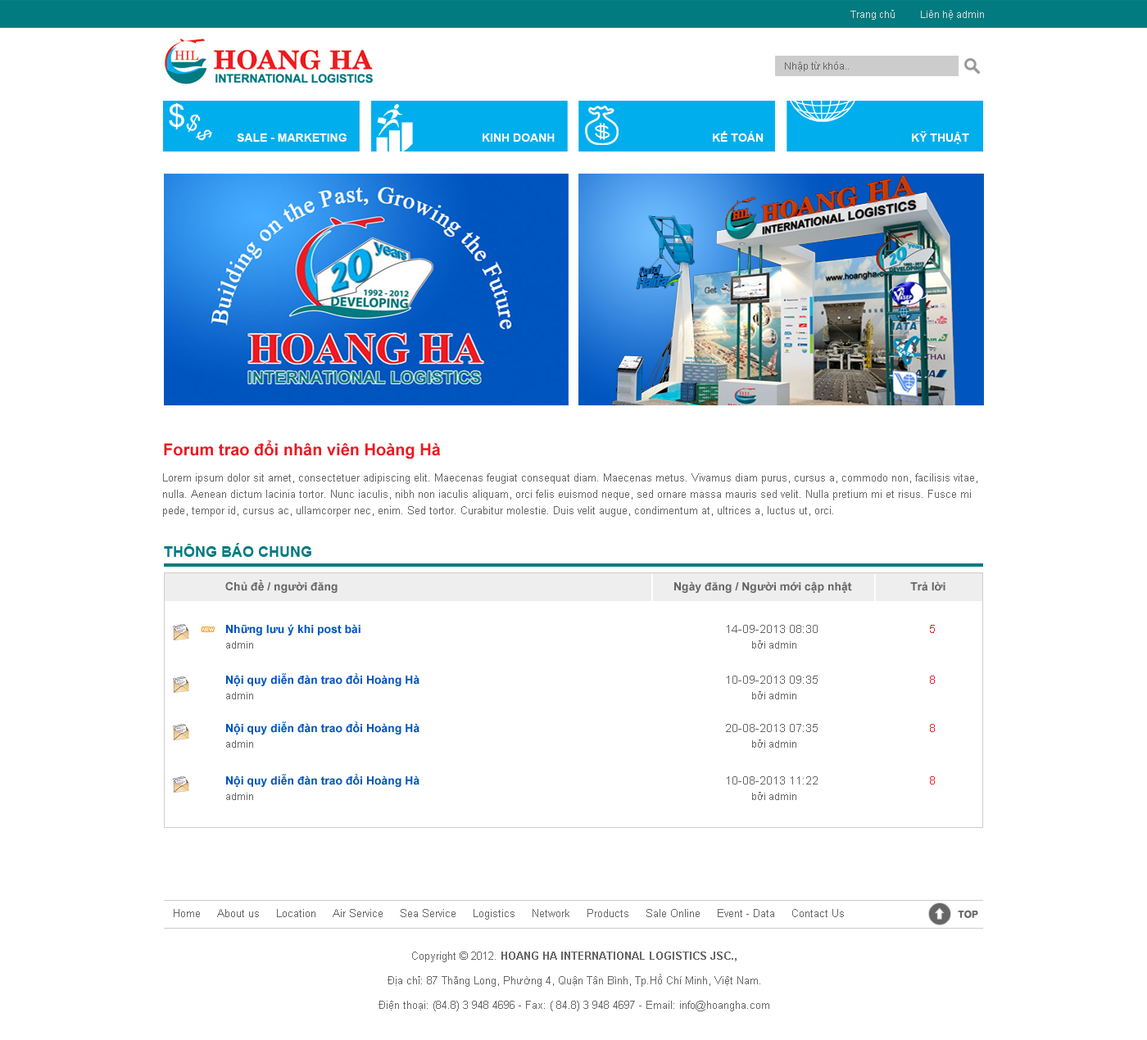
<style>
.page{position:relative;width:1147px;height:1040px;background:#ffffff}
.page>*{position:absolute;margin:0}
.t1{font:9.8px "ArialMT";color:#dddddd}
.t2{font:9.8px "ArialMT";color:#666666}
.t3{font:11.5px "Arial-BoldMT";color:#ffffff}
.t4{font:16.4px "Arial-BoldMT";color:#ed1721}
.t5{font:10.6px/16.4px "ArialMT";color:#666666}
.t6{font:14.7px "Arial-BoldMT";color:#017b80}
.t7{font:11.5px "Arial-BoldMT";color:#666666}
.t8{font:11.5px "Arial-BoldMT";color:#0055be}
.t9{font:11.5px "ArialMT";color:#666666}
.t10{font:11.5px "ArialMT";color:#f01e27}
.t11{font:10.6px "ArialMT";color:#666666}
.t12{font:10.6px/16.4px "Arial-BoldMT";color:#666666}
</style>
<div class="page">
<p class="t1" style="left:850px;top:10px;width:134px;height:10px">Trang chủ          Liên hệ admin</p>
<p class="t2" style="left:785px;top:61px;width:63px;height:10px">Nhập từ khóa..</p>
<p class="t3" style="left:237px;top:133px;width:109px;height:9px">SALE - MARKETING</p>
<p class="t3" style="left:482px;top:133px;width:72px;height:9px">KINH DOANH</p>
<p class="t3" style="left:712px;top:131px;width:51px;height:11px">KẾ TOÁN</p>
<p class="t3" style="left:911px;top:131px;width:58px;height:13px">KỸ THUẬT</p>
<p class="t4" style="left:164px;top:440px;width:277px;height:19px">Forum trao đổi nhân viên Hoàng Hà</p>
<p class="t5" style="left:163px;top:473px;width:814px;height:44px">Lorem ipsum dolor sit amet, consectetuer adipiscing elit. Maecenas feugiat consequat diam. Maecenas metus. Vivamus diam purus, cursus a, commodo non, facilisis vitae, nulla. Aenean dictum lacinia tortor. Nunc iaculis, nibh non iaculis aliquam, orci felis euismod neque, sed ornare massa mauris sed velit. Nulla pretium mi et risus. Fusce mi pede, tempor id, cursus ac, ullamcorper nec, enim. Sed tortor. Curabitur molestie. Duis velit augue, condimentum at, ultrices a, luctus ut, orci.</p>
<p class="t6" style="left:164px;top:543px;width:147px;height:14px">THÔNG BÁO CHUNG</p>
<p class="t7" style="left:225px;top:580px;width:112px;height:13px">Chủ đề / người đăng</p>
<p class="t7" style="left:674px;top:581px;width:178px;height:12px">Ngày đăng / Người mới cập nhật</p>
<p class="t7" style="left:910px;top:581px;width:35px;height:10px">Trả lời</p>
<p class="t8" style="left:226px;top:624px;width:134px;height:11px">Những lưu ý khi post bài</p>
<p class="t9" style="left:726px;top:625px;width:91px;height:8px">14-09-2013 08:30</p>
<p class="t10" style="left:929px;top:625px;width:5px;height:8px">5</p>
<p class="t2" style="left:226px;top:641px;width:27px;height:8px">admin</p>
<p class="t2" style="left:752px;top:640px;width:44px;height:9px">bởi admin</p>
<p class="t8" style="left:226px;top:673px;width:193px;height:13px">Nội quy diễn đàn trao đổi Hoàng Hà</p>
<p class="t9" style="left:726px;top:676px;width:91px;height:8px">10-09-2013 09:35</p>
<p class="t10" style="left:929px;top:676px;width:5px;height:8px">8</p>
<p class="t2" style="left:226px;top:692px;width:27px;height:7px">admin</p>
<p class="t2" style="left:752px;top:691px;width:44px;height:8px">bởi admin</p>
<p class="t8" style="left:226px;top:721px;width:193px;height:14px">Nội quy diễn đàn trao đổi Hoàng Hà</p>
<p class="t9" style="left:726px;top:724px;width:91px;height:8px">20-08-2013 07:35</p>
<p class="t10" style="left:929px;top:724px;width:5px;height:8px">8</p>
<p class="t2" style="left:226px;top:740px;width:27px;height:8px">admin</p>
<p class="t2" style="left:752px;top:740px;width:44px;height:8px">bởi admin</p>
<p class="t8" style="left:226px;top:774px;width:193px;height:13px">Nội quy diễn đàn trao đổi Hoàng Hà</p>
<p class="t9" style="left:726px;top:776px;width:91px;height:9px">10-08-2013 11:22</p>
<p class="t10" style="left:929px;top:776px;width:5px;height:9px">8</p>
<p class="t2" style="left:226px;top:793px;width:27px;height:7px">admin</p>
<p class="t2" style="left:752px;top:792px;width:44px;height:8px">bởi admin</p>
<p class="t11" style="left:174px;top:909px;width:670px;height:11px">Home     About us     Location     Air Service     Sea Service     Logistics     Network     Products     Sale Online     Event - Data     Contact Us</p>
<p class="t5" style="left:378px;top:952px;width:391px;height:59px;text-align:center">Copyright © 2012. <span class="t12">HOANG HA INTERNATIONAL LOGISTICS JSC.,<br></span>Địa chỉ: 87 Thăng Long, Phường 4, Quận Tân Bình, Tp.Hồ Chí Minh, Việt Nam.<br>Điện thoại: (84.8) 3 948 4696 - Fax: ( 84.8) 3 948 4697 - Email: info@hoangha.com</p>
</div>
